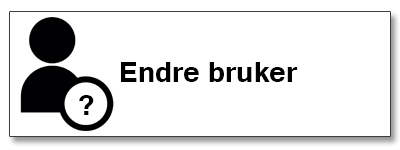
<style>
.page{position:relative;width:400px;height:150px;background:#ffffff}
.page>*{position:absolute;margin:0}
.t1{font:36px "Tunga-Bold";color:#000000}
</style>
<div class="page">
<p class="t1" style="left:121px;top:62px;width:177px;height:20px">Endre bruker</p>
<p class="t1" style="left:79px;top:95px;width:15px;height:20px">?</p>
</div>
